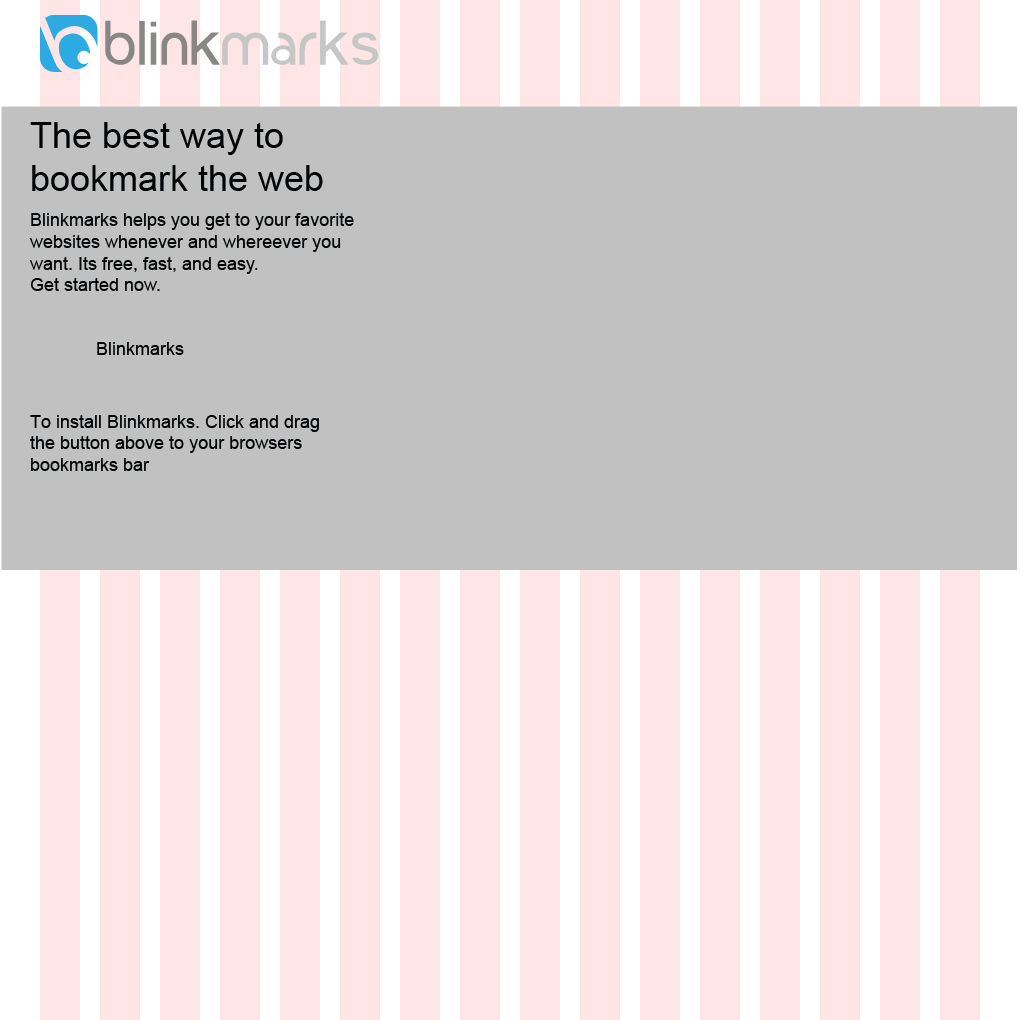
<style>
.page{position:relative;width:1020px;height:1020px;background:#c1c1c1}
.page>*{position:absolute;margin:0}
.t1{font:36px "ArialMT";color:#000203}
.t2{font:18px "ArialMT";color:#000203}
</style>
<div class="page">
<p class="t1" style="left:30px;top:122px;width:293px;height:69px">The best way to bookmark the web</p>
<p class="t2" style="left:29px;top:213px;width:325px;height:78px">Blinkmarks helps you get to your favorite websites whenever and whereever you want. Its free, fast, and easy. <br>Get started now.</p>
<p class="t2" style="left:97px;top:342px;width:87px;height:13px">Blinkmarks</p>
<p class="t2" style="left:30px;top:415px;width:289px;height:56px">To install Blinkmarks. Click and drag the button above to your browsers bookmarks bar</p>
</div>
